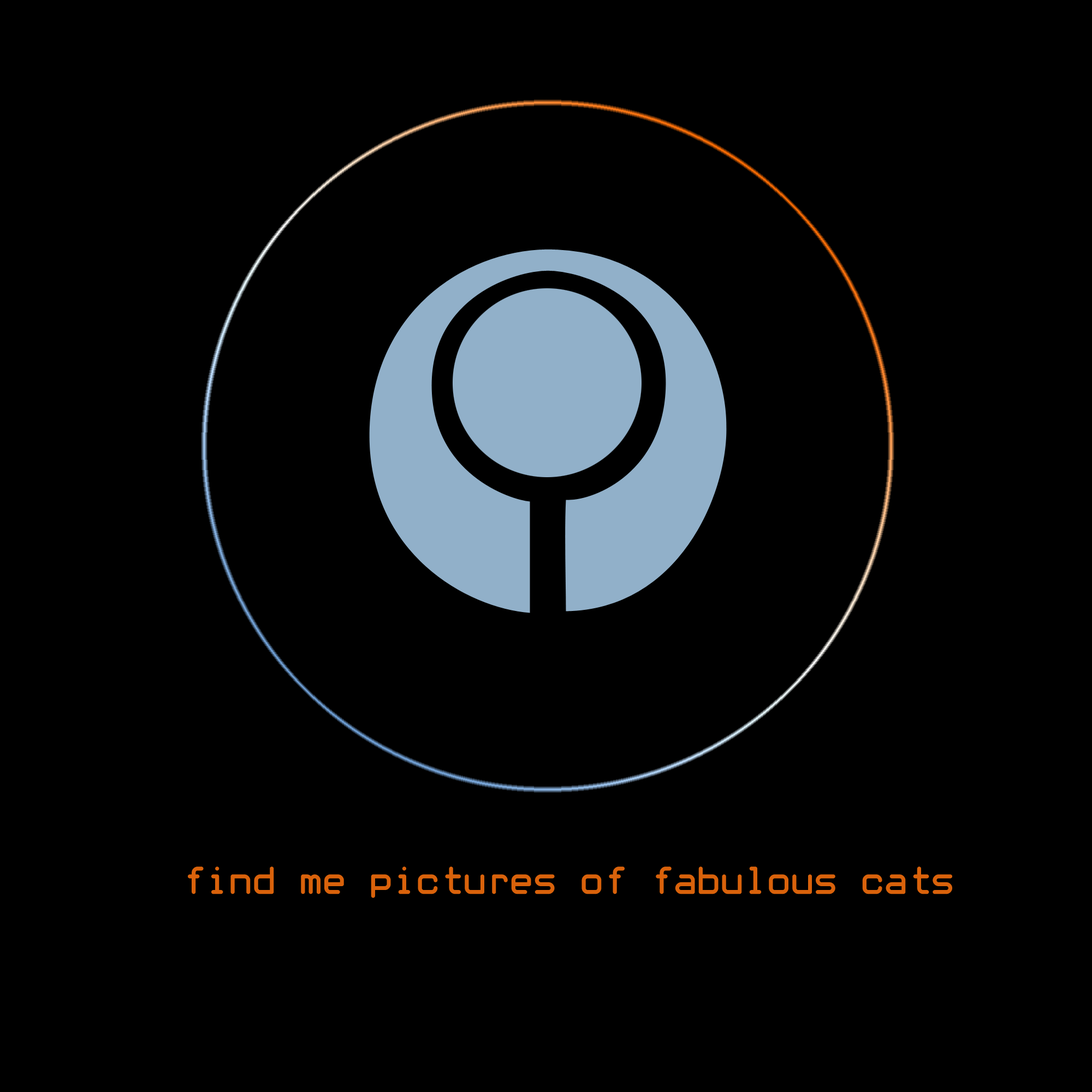
<style>
.page{position:relative;width:1092px;height:1092px;background:#000000}
.page>*{position:absolute;margin:0}
.t1{font:40.9px "WhiteRabbit";color:#d9620b}
</style>
<div class="page">
<p class="t1" style="left:188px;top:866px;width:764px;height:32px">find me pictures of fabulous cats</p>
</div>
